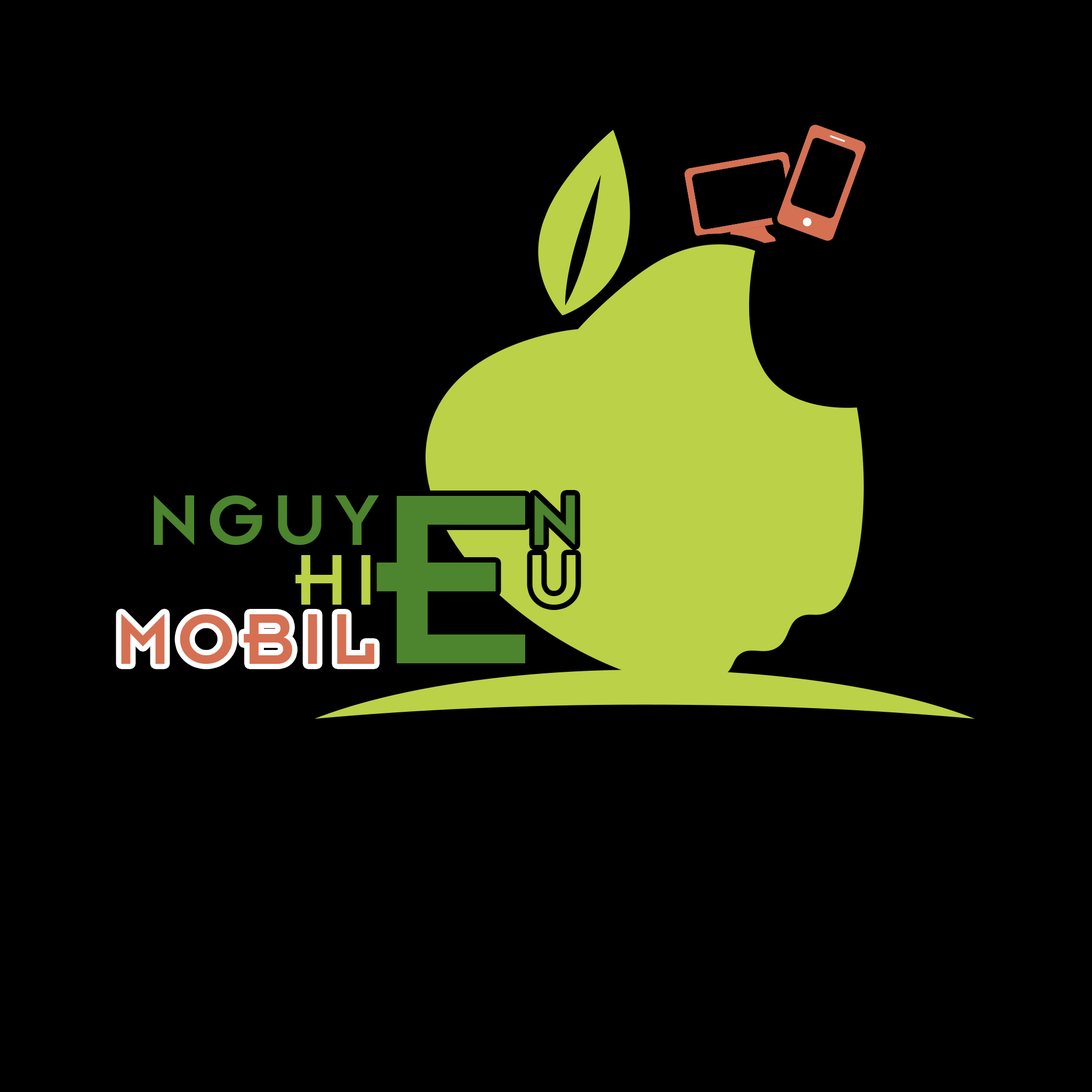
<style>
.page{position:relative;width:1092px;height:1092px;background:#000000}
.page>*{position:absolute;margin:0}
.t1{font:77.3px "SFUInsignia";letter-spacing:0.1em;color:#4c852d}
.t2{font:266.6px "SFUInsignia";letter-spacing:0.05em;color:#4c852d}
.t3{font:77.3px "SFUInsignia";letter-spacing:0.1em;color:#bbd147}
</style>
<div class="page">
<p class="t1" style="left:154px;top:495px;width:421px;height:50px">NGUY     N</p>
<p class="t2" style="left:376px;top:496px;width:149px;height:167px">E</p>
<p class="t3" style="left:295px;top:555px;width:281px;height:50px">HI     U</p>
</div>
